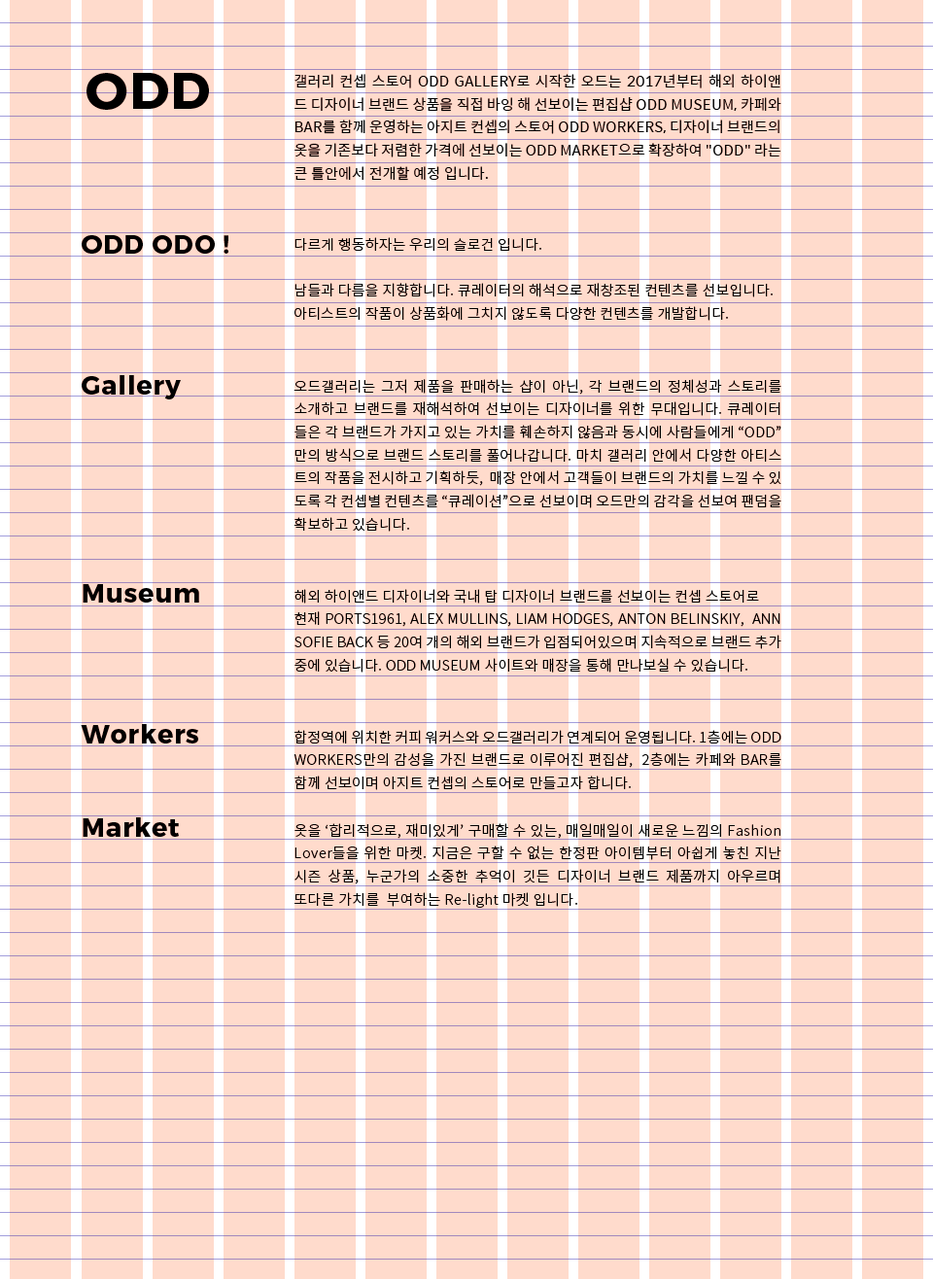
<style>
.page{position:relative;width:933px;height:1279px;background:#ffdbcc}
.page>*{position:absolute;margin:0}
.t1{font:51.8px "Montserrat-Bold";letter-spacing:0.03em;color:#000000}
.t2{font:14.2px/23px "SpoqaHanSans-Regular";letter-spacing:0.03em;color:#000000}
.t3{font:25.9px "Montserrat-Bold";letter-spacing:0.03em;color:#000000}
.t4{font:14.2px/23px "NotoSansCJKkr-Light";letter-spacing:0.03em;color:#000000}
</style>
<div class="page">
<p class="t1" style="left:86px;top:73px;width:123px;height:37px">ODD</p>
<p class="t2" style="left:294px;top:74px;width:487px;height:107px;text-align:justify">갤러리 컨셉 스토어 ODD GALLERY로 시작한 오드는 2017년부터 해외 하이앤 드 디자이너 브랜드 상품을 직접 바잉 해 선보이는 편집샵 ODD MUSEUM, 카페와 BAR를 함께 운영하는 아지트 컨셉의 스토어 ODD WORKERS, 디자이너 브랜드의 옷을 기존보다 저렴한 가격에 선보이는 ODD MARKET으로 확장하여 "ODD" 라는 큰 틀안에서 전개할 예정 입니다.</p>
<p class="t3" style="left:82px;top:235px;width:146px;height:19px">ODD ODO !</p>
<p class="t4" style="left:294px;top:237px;width:478px;height:84px;text-align:justify">다르게 행동하자는 우리의 슬로건 입니다.<br><br>남들과 다름을 지향합니다. 큐레이터의 해석으로 재창조된 컨텐츠를 선보입니다. <br>아티스트의 작품이 상품화에 그치지 않도록 다양한 컨텐츠를 개발합니다.</p>
<p class="t3" style="left:82px;top:375px;width:99px;height:24px">Gallery</p>
<p class="t4" style="left:293px;top:379px;width:488px;height:152px;text-align:justify">오드갤러리는 그저 제품을 판매하는 샵이 아닌, 각 브랜드의 정체성과 스토리를 소개하고 브랜드를 재해석하여 선보이는 디자이너를 위한 무대입니다. 큐레이터 들은 각 브랜드가 가지고 있는 가치를 훼손하지 않음과 동시에 사람들에게 “ODD” 만의 방식으로 브랜드 스토리를 풀어나갑니다. 마치 갤러리 안에서 다양한 아티스 트의 작품을 전시하고 기획하듯,  매장 안에서 고객들이 브랜드의 가치를 느낄 수 있 도록 각 컨셉별 컨텐츠를 “큐레이션”으로 선보이며 오드만의 감각을 선보여 팬덤을 확보하고 있습니다.</p>
<p class="t3" style="left:83px;top:584px;width:116px;height:18px">Museum</p>
<p class="t4" style="left:294px;top:589px;width:487px;height:83px;text-align:justify">해외 하이앤드 디자이너와 국내 탑 디자이너 브랜드를 선보이는 컨셉 스토어로<br>현재 PORTS1961, ALEX MULLINS, LIAM HODGES, ANTON BELINSKIY,  ANN SOFIE BACK 등 20여 개의 해외 브랜드가 입점되어있으며 지속적으로 브랜드 추가 중에 있습니다. ODD MUSEUM 사이트와 매장을 통해 만나보실 수 있습니다.</p>
<p class="t3" style="left:81px;top:724px;width:117px;height:19px">Workers</p>
<p class="t4" style="left:293px;top:730px;width:488px;height:60px;text-align:justify">합정역에 위치한 커피 워커스와 오드갤러리가 연계되어 운영됩니다. 1층에는 ODD WORKERS만의 감성을 가진 브랜드로 이루어진 편집샵,  2층에는 카페와 BAR를 함께 선보이며 아지트 컨셉의 스토어로 만들고자 합니다.</p>
<p class="t3" style="left:83px;top:817px;width:96px;height:19px">Market</p>
<p class="t4" style="left:294px;top:823px;width:487px;height:84px;text-align:justify">옷을 ‘합리적으로, 재미있게’ 구매할 수 있는, 매일매일이 새로운 느낌의 Fashion Lover들을 위한 마켓. 지금은 구할 수 없는 한정판 아이템부터 아쉽게 놓친 지난 시즌 상품, 누군가의 소중한 추억이 깃든 디자이너 브랜드 제품까지 아우르며 또다른 가치를  부여하는 Re-light 마켓 입니다.</p>
</div>
